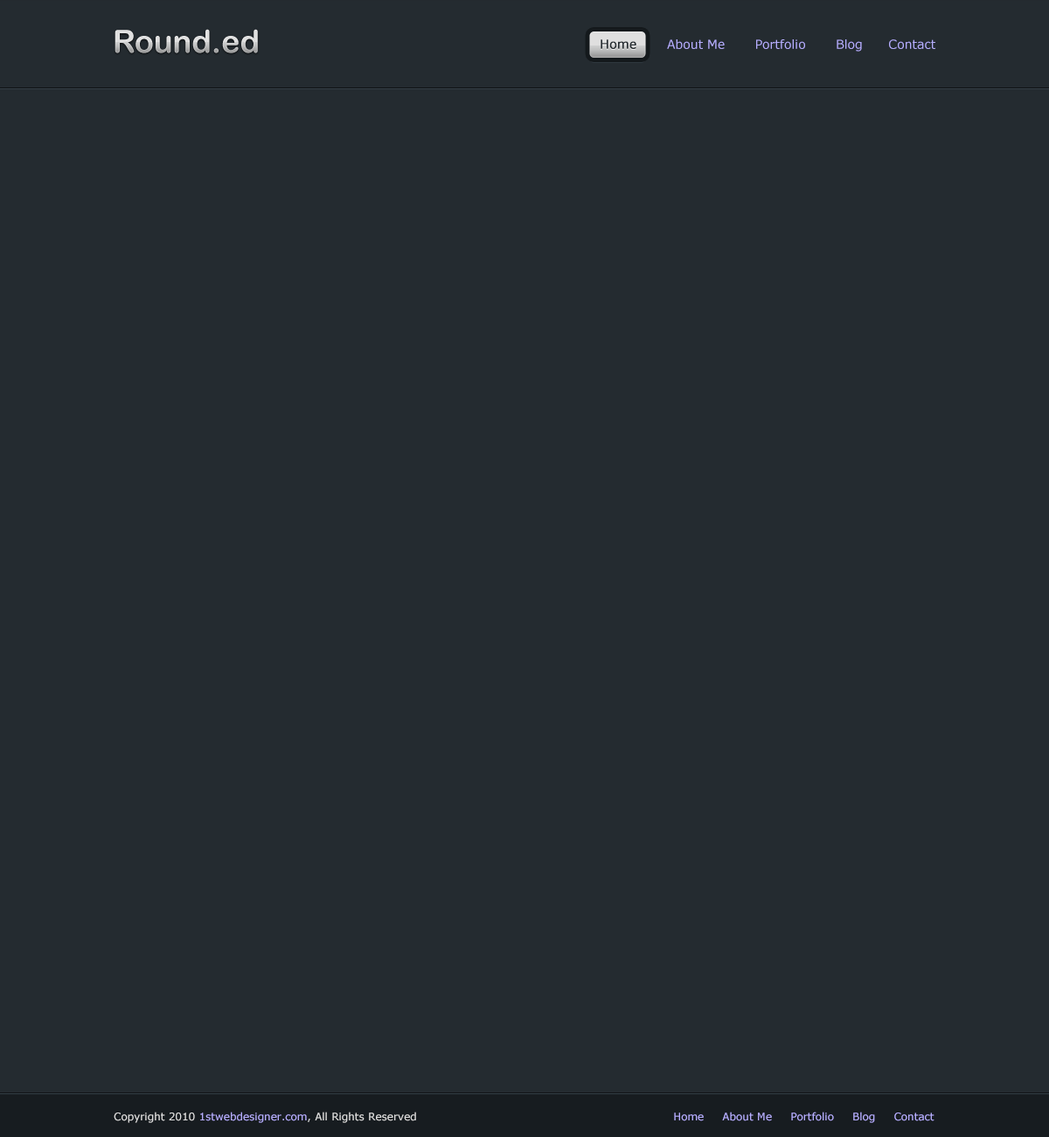
<style>
.page{position:relative;width:1049px;height:1137px;background:#242b30}
.page>*{position:absolute;margin:0}
.t1{font:31.5px "ArialRoundedMTBold"}
.t2{font:12.2px "Verdana";color:#242b30;font-weight:bold}
.t3{font:12.2px "Verdana";color:#b6aeff}
.t4{font:10.5px "Verdana";color:#b6aeff}
.t5{font:10.5px "Verdana";color:#dfdfdf}
</style>
<div class="page">
<p class="t1" style="left:115px;top:29px;width:143px;height:24px">Round.ed</p>
<p class="t2" style="left:601px;top:39px;width:35px;height:10px">Home</p>
<p class="t3" style="left:667px;top:39px;width:268px;height:13px">About Me       Portfolio       Blog      Contact</p>
<p class="t4" style="left:114px;top:1111px;width:821px;height:12px"><span class="t5">Copyright 2010 </span>1stwebdesigner.com<span class="t5">, All Rights Reserved                </span>Home     About Me     Portfolio     Blog     Contact</p>
</div>
